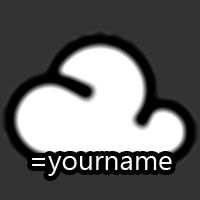
<style>
.page{position:relative;width:200px;height:200px;background:#333333}
.page>*{position:absolute;margin:0}
.t1{font:28.1px "SegoeUI";color:#ffffff}
</style>
<div class="page">
<p class="t1" style="left:32px;top:156px;width:140px;height:20px">=yourname</p>
</div>
